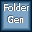
<style>
.page{position:relative;width:32px;height:32px;background:#7fa6c7}
.page>*{position:absolute;margin:0}
.t1{font:10px "Verdana";color:#ffffff;scale:0.83 1}
</style>
<div class="page">
<p class="t1" style="left:4px;top:3px;width:25px;height:20px;text-align:center">Folder<br>Gen</p>
</div>
